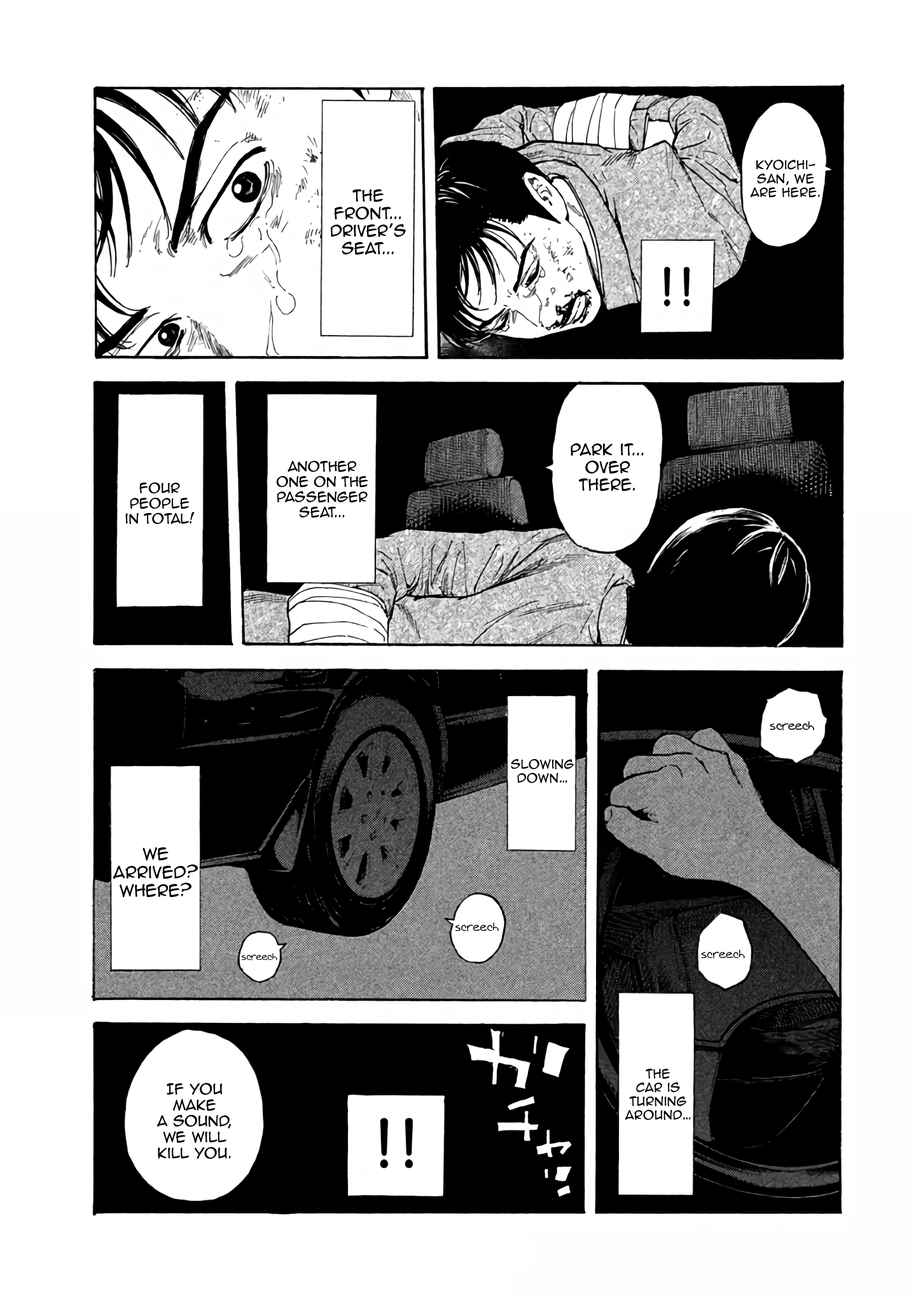
<style>
.page{position:relative;width:916px;height:1302px;background:#ffffff}
.page>*{position:absolute;margin:0}
.t1{font:11.4px "AnimeAce2.0BB";color:#000000}
.t2{font:14.6px "AnimeAce2.0BB";color:#000000}
.t3{font:12.7px "AnimeAce2.0BB";color:#000000}
.t4{font:12.1px "Augie";color:#000000}
.t5{font:15.3px "AnimeAce2.0BB";color:#000000}
.t6{font:11.4px "Augie";color:#000000}
.t7{font:9.5px "Augie";color:#000000}
.t8{font:13.4px "AnimeAce2.0BB";color:#000000}
</style>
<div class="page">
<p class="t1" style="left:750px;top:160px;width:70px;height:38px;text-align:center">Kyoichi-<br>san, we are here.</p>
<p class="t2" style="left:330px;top:189px;width:76px;height:66px;text-align:center">The front... Driver’s seat...</p>
<p class="t2" style="left:570px;top:443px;width:74px;height:49px;text-align:center">Park it... over there.</p>
<p class="t3" style="left:276px;top:460px;width:92px;height:58px;text-align:center">Another <br>one on the passenger seat...</p>
<p class="t3" style="left:125px;top:482px;width:70px;height:43px;text-align:center">Four people in total!</p>
<p class="t4" style="left:769px;top:721px;width:45px;height:10px">screech</p>
<p class="t1" style="left:511px;top:759px;width:63px;height:24px;text-align:center">Slowing down…</p>
<p class="t5" style="left:113px;top:847px;width:85px;height:51px;text-align:center">We arrived?<br>Where?</p>
<p class="t6" style="left:455px;top:923px;width:44px;height:9px">screech</p>
<p class="t7" style="left:242px;top:953px;width:35px;height:8px">screech</p>
<p class="t6" style="left:701px;top:949px;width:44px;height:10px">screech</p>
<p class="t1" style="left:624px;top:1069px;width:67px;height:51px;text-align:center">The <br>car is turning around…</p>
<p class="t8" style="left:157px;top:1083px;width:74px;height:76px;text-align:center">If You make <br>a sound, <br>we will <br>kill you.</p>
</div>
